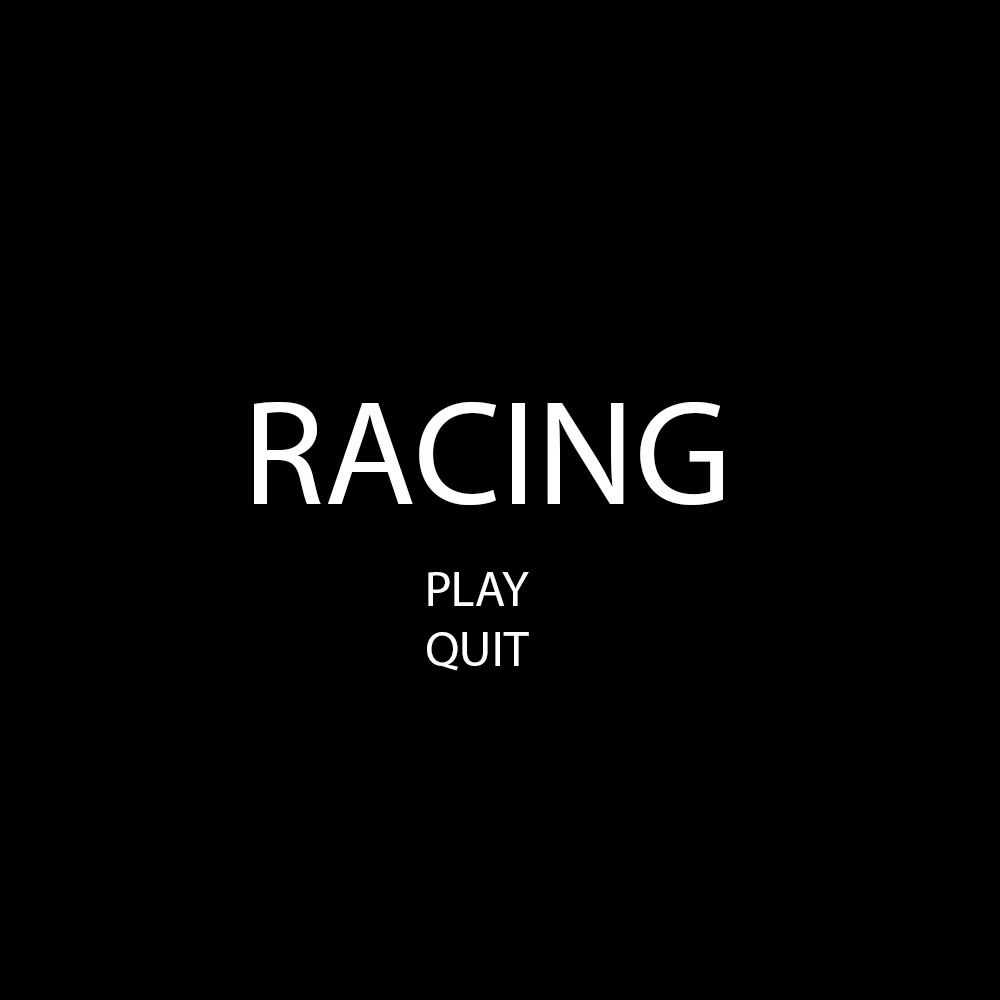
<style>
.page{position:relative;width:1000px;height:1000px;background:#000000}
.page>*{position:absolute;margin:0}
.t1{font:150px "MyriadPro-Regular";color:#ffffff}
.t2{font:50px "MyriadPro-Regular";color:#ffffff}
</style>
<div class="page">
<p class="t1" style="left:254px;top:401px;width:469px;height:104px">RACING</p>
<p class="t2" style="left:427px;top:572px;width:102px;height:99px;text-align:center">PLAY<br>QUIT</p>
</div>
